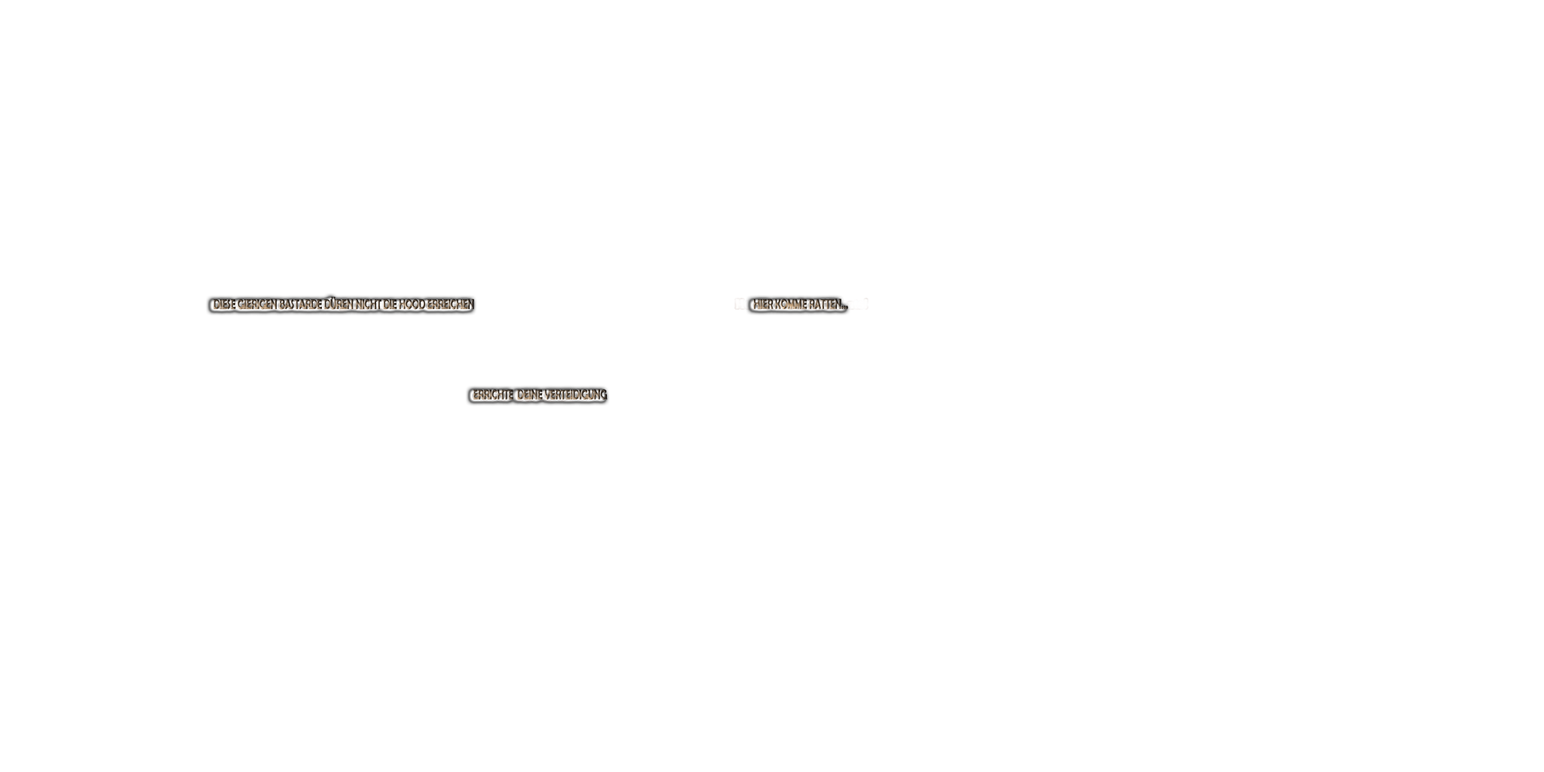
<style>
.page{position:relative;width:1544px;height:772px;background:#ffffff}
.page>*{position:absolute;margin:0}
.t1{font:14.4px "BerlinSansFBDemi-Bold";letter-spacing:-0.04em;text-transform:uppercase;scale:0.65 1}
</style>
<div class="page">
<p class="t1" style="left:213px;top:296px;width:261px;height:14px">Diese gierigen Bastarde düren nicht die Hood erreichen</p>
<p class="t1" style="left:753px;top:299px;width:95px;height:10px">Hier komme Ratten...</p>
<p class="t1" style="left:473px;top:389px;width:135px;height:11px">Errichte  deine Verteidigung</p>
</div>
